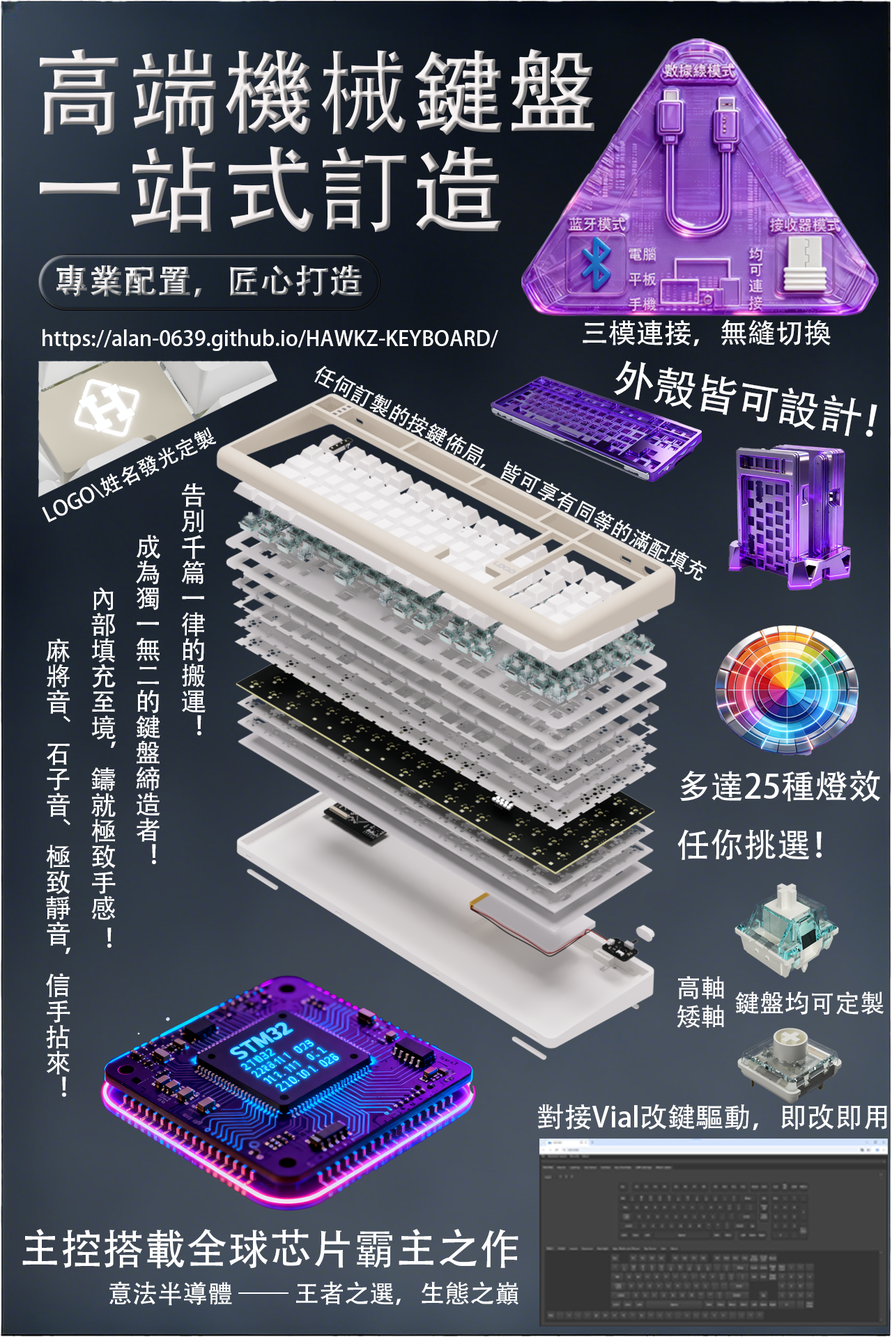
<style>
.page{position:relative;width:892px;height:1337px}
.page>*{position:absolute;margin:0}
.t1{font:20.9px "AdobeHeitiStd-Regular";color:#ffffff}
.t2{font:27.9px "AdobeHeitiStd-Regular";color:#ffffff}
.t3{font:41.8px "AdobeHeitiStd-Regular";color:#ffffff}
.t4{font:25.8px "AdobeHeitiStd-Regular";color:#ffffff}
.t5{font:33.4px "AdobeHeitiStd-Regular";color:#ffffff}
.t6{font:25.1px "AdobeHeitiStd-Regular";color:#ffffff}
</style>
<div class="page">
<p class="t1" style="left:42px;top:329px;width:456px;height:22px">https://alan-0639.github.io/HAWKZ-KEYBOARD/</p>
<p class="t2" style="left:582px;top:320px;width:248px;height:26px">三模連接，無縫切換</p>
<p class="t3" style="left:613px;top:361px;width:264px;height:76px;rotate:10deg">外殼皆可設計！</p>
<p class="t1" style="left:42px;top:427px;width:175px;height:95px;rotate:-26deg">LOGO\姓名發光定製</p>
<p class="t4" style="left:46px;top:483px;width:159px;height:614px">告別千篇一律的搬運！<br>         成為獨一無二的鍵盤締造者！<br>                  內部填充至境，鑄就極致手感 ！<br>                           麻將音、石子音、極致靜音，信手拈來！</p>
<p class="t5" style="left:677px;top:770px;width:203px;height:90px">多達25種燈效<br>任你挑選！</p>
<p class="t6" style="left:678px;top:976px;width:46px;height:24px">高軸</p>
<p class="t6" style="left:735px;top:991px;width:149px;height:24px">鍵盤均可定製</p>
<p class="t6" style="left:676px;top:1005px;width:48px;height:23px">矮軸</p>
<p class="t2" style="left:537px;top:1104px;width:350px;height:27px">對接Vial改鍵驅動，即改即用</p>
<p class="t3" style="left:22px;top:1229px;width:496px;height:40px">主控搭載全球芯片霸主之作</p>
<p class="t6" style="left:109px;top:1282px;width:409px;height:24px">意法半導體 —— 王者之選，生態之巔</p>
</div>
